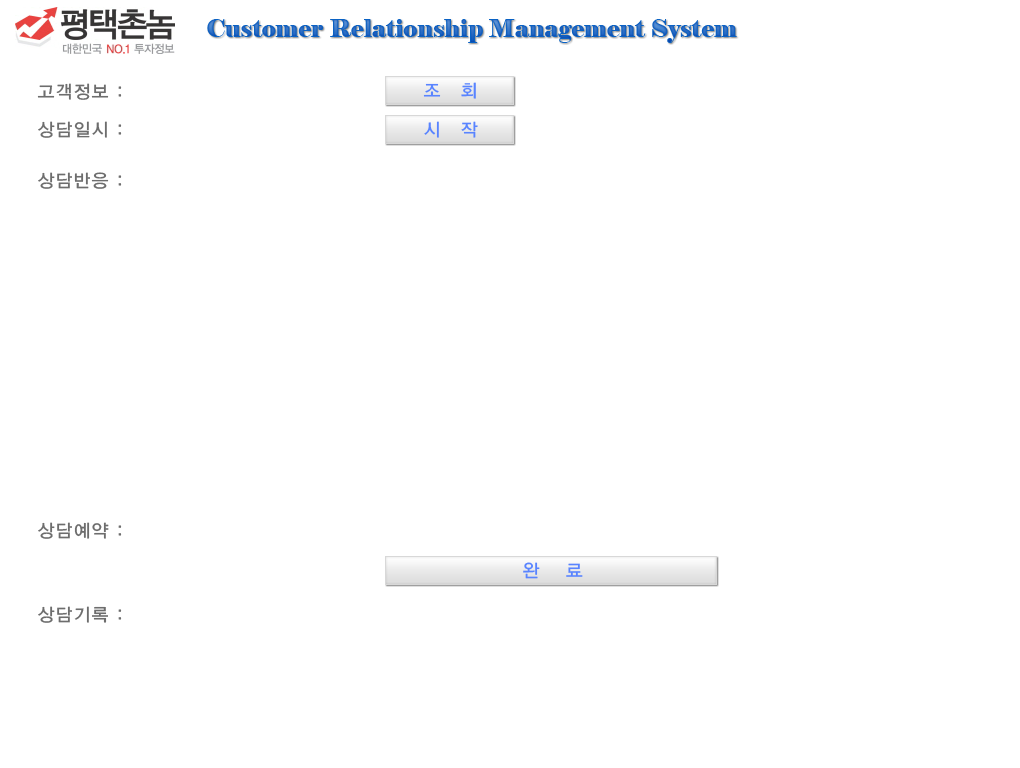
<style>
.page{position:relative;width:1020px;height:768px;background:#ffffff}
.page>*{position:absolute;margin:0}
.t1{font:24px "Elephant-Regular";color:#1762c2}
.t2{font:18px "YGO135";color:#6d6d6d}
.t3{font:18px "YGO135";color:#5984ff}
</style>
<div class="page">
<p class="t1" style="left:207px;top:19px;width:530px;height:24px">Customer Relationship Management System</p>
<p class="t2" style="left:37px;top:83px;width:85px;height:17px">고객정보 :</p>
<p class="t3" style="left:423px;top:82px;width:53px;height:17px">조   회</p>
<p class="t2" style="left:38px;top:121px;width:84px;height:17px">상담일시 :</p>
<p class="t3" style="left:424px;top:121px;width:54px;height:17px">시   작</p>
<p class="t2" style="left:38px;top:172px;width:84px;height:17px">상담반응 :</p>
<p class="t2" style="left:38px;top:522px;width:84px;height:17px">상담예약 :</p>
<p class="t3" style="left:523px;top:562px;width:60px;height:17px">완    료</p>
<p class="t2" style="left:38px;top:606px;width:84px;height:17px">상담기록 :</p>
</div>
